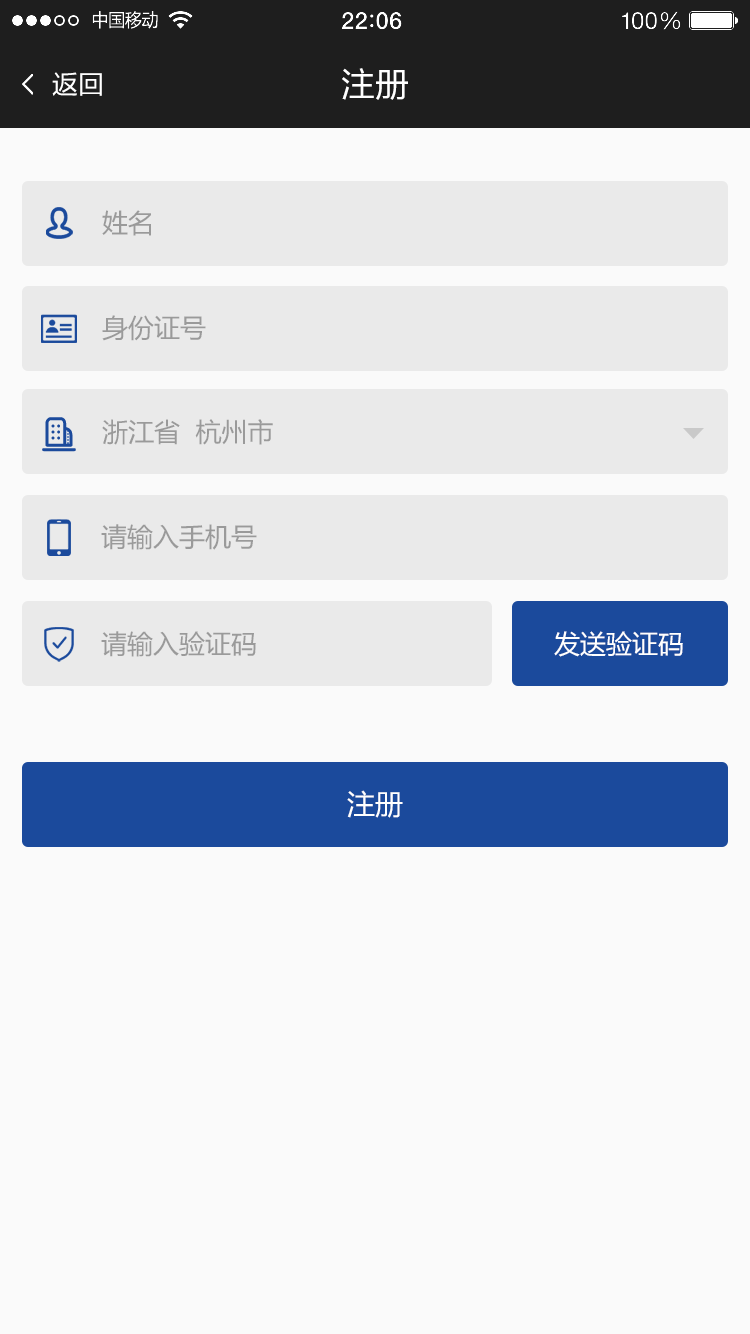
<style>
.page{position:relative;width:750px;height:1334px;background:#fafafa}
.page>*{position:absolute;margin:0}
.t1{font:26px "FZLTHJW--GB1-0";color:#ffffff}
.t2{font:34px "FZLTHJW--GB1-0";color:#ffffff}
.t3{font:26px "MicrosoftYaHei";color:#9a9a9a}
.t4{font:26px "MicrosoftYaHei";color:#ffffff}
.t5{font:28px "MicrosoftYaHei";color:#ffffff}
</style>
<div class="page">
<p class="t1" style="left:52px;top:72px;width:50px;height:24px">返回</p>
<p class="t2" style="left:342px;top:68px;width:66px;height:32px">注册</p>
<p class="t3" style="left:102px;top:210px;width:49px;height:26px">姓名</p>
<p class="t3" style="left:102px;top:315px;width:104px;height:26px">身份证号</p>
<p class="t3" style="left:102px;top:419px;width:171px;height:26px">浙江省  杭州市</p>
<p class="t3" style="left:101px;top:524px;width:156px;height:26px">请输入手机号</p>
<p class="t3" style="left:101px;top:631px;width:155px;height:26px">请输入验证码</p>
<p class="t4" style="left:554px;top:631px;width:129px;height:26px">发送验证码</p>
<p class="t5" style="left:347px;top:790px;width:56px;height:28px">注册</p>
</div>
